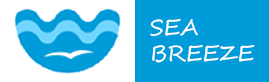
<style>
.page{position:relative;width:269px;height:82px;background:#009cd9}
.page>*{position:absolute;margin:0}
.t1{font:21.7px "SegoeScript";color:#ffffff}
</style>
<div class="page">
<p class="t1" style="left:150px;top:18px;width:105px;height:45px;text-align:right">SEA<br>BREEZE</p>
</div>
